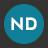
<style>
.page{position:relative;width:48px;height:48px;background:#333333}
.page>*{position:absolute;margin:0}
.t1{font:17px "nevis-Bold";letter-spacing:0.05em;color:#ffffff}
</style>
<div class="page">
<p class="t1" style="left:11px;top:17px;width:26px;height:13px">ND</p>
</div>
